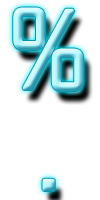
<style>
.page{position:relative;width:100px;height:200px;background:#ffffff}
.page>*{position:absolute;margin:0}
.t1{font:107px "ZektonRg-Regular";font-weight:bold}
</style>
<div class="page">
<p class="t1" style="left:13px;top:7px;width:71px;height:85px">%</p>
<p class="t1" style="left:42px;top:178px;width:13px;height:13px">.</p>
</div>
